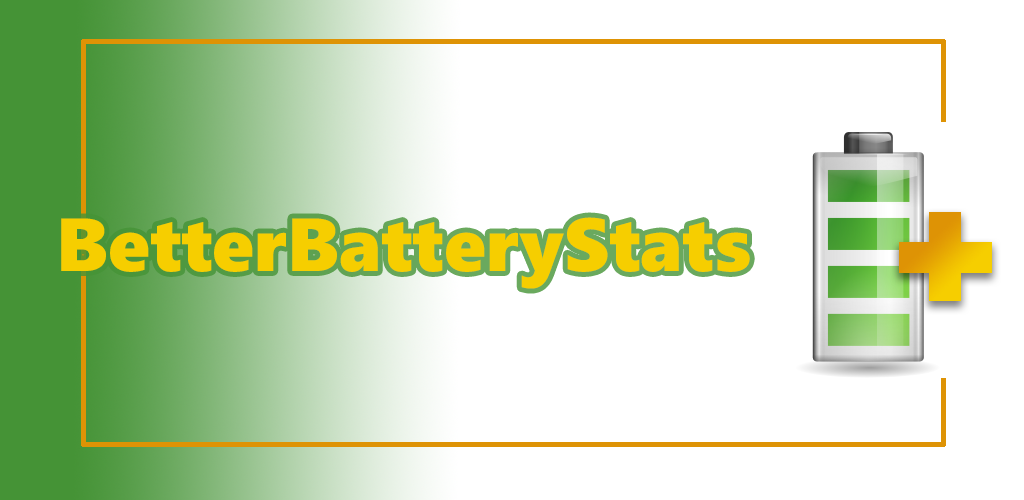
<style>
.page{position:relative;width:1024px;height:500px;background:#ffffff}
.page>*{position:absolute;margin:0}
.t1{font:75px "SegoeWP-Black";color:#f6ce00}
</style>
<div class="page">
<p class="t1" style="left:61px;top:217px;width:689px;height:72px">BetterBatteryStats</p>
</div>
